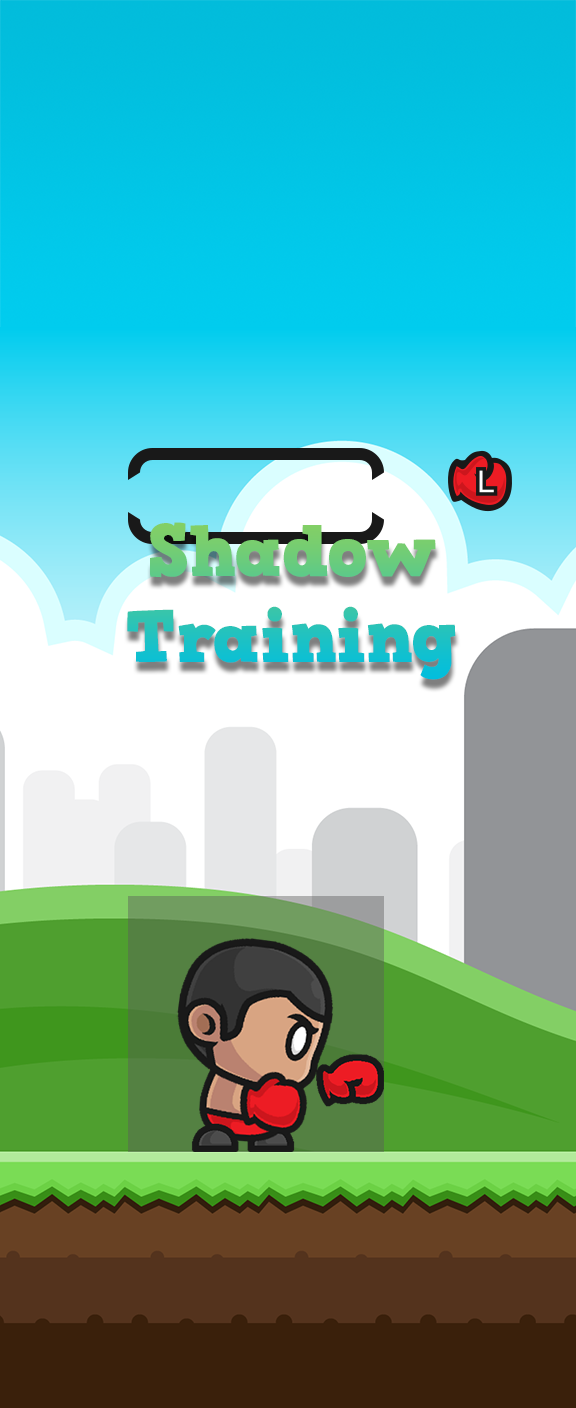
<style>
.page{position:relative;width:576px;height:1408px}
.page>*{position:absolute;margin:0}
.t1{font:72px "HVDComicSerifPro"}
</style>
<div class="page">
<p class="t1" style="left:127px;top:522px;width:329px;height:158px;text-align:center">Shadow<br>Training</p>
</div>
